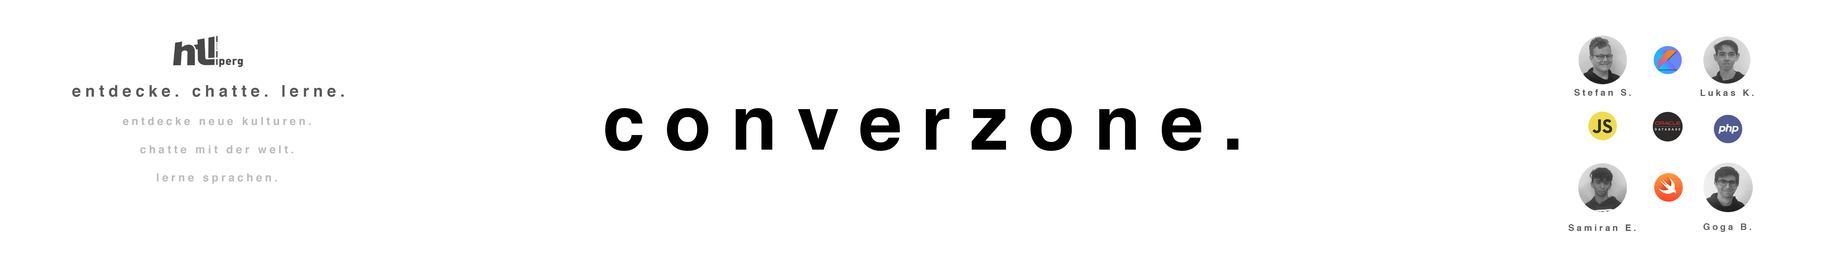
<style>
.page{position:relative;width:1843px;height:259px;background:#ffffff}
.page>*{position:absolute;margin:0}
.t1{font:11px/28.2px "Helvetica-Bold";letter-spacing:0.26em;color:#bababa}
.t2{font:16px/171.2px "Helvetica-Bold";letter-spacing:0.26em;color:#595959}
.t3{font:9px "Helvetica-Bold";letter-spacing:0.26em;color:#595959}
.t4{font:76px "Helvetica-Bold";letter-spacing:0.26em;color:#000000}
.t5{font:9px "Helvetica-Bold";letter-spacing:0.26em;color:#606060}
</style>
<div class="page">
<p class="t1" style="left:72px;top:85px;width:272px;height:99px;text-align:center"><span class="t2">entdecke. chatte. lerne.  </span><br>entdecke neue kulturen.<br>chatte mit der welt.<br>lerne sprachen.</p>
<p class="t3" style="left:1574px;top:89px;width:57px;height:7px">Stefan S.</p>
<p class="t3" style="left:1701px;top:90px;width:53px;height:6px">Lukas K.</p>
<p class="t4" style="left:605px;top:108px;width:634px;height:43px">converzone.</p>
<p class="t3" style="left:1569px;top:224px;width:67px;height:7px">Samiran E.</p>
<p class="t5" style="left:1704px;top:223px;width:47px;height:9px">Goga B.</p>
</div>
